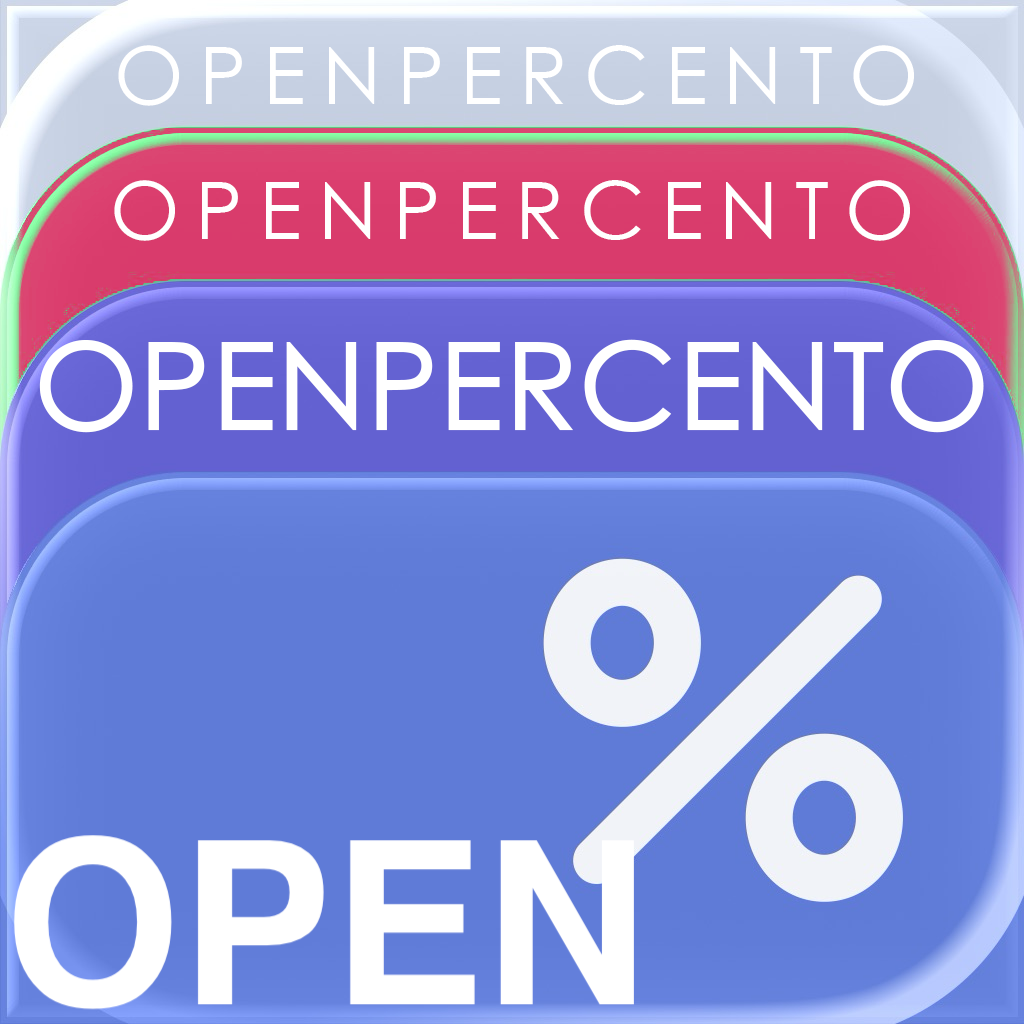
<style>
.page{position:relative;width:1024px;height:1024px}
.page>*{position:absolute;margin:0}
.t1{font:80px "STHeitiSC-Light";letter-spacing:0.2em;color:#ffffff;text-transform:uppercase}
.t2{font:120px "STHeitiSC-Medium";letter-spacing:0.01em;color:#ffffff;text-transform:uppercase}
</style>
<div class="page">
<p class="t1" style="left:118px;top:45px;width:796px;height:61px">OPENPercento</p>
<p class="t1" style="left:114px;top:180px;width:796px;height:61px">OPENPercento</p>
<p class="t2" style="left:39px;top:339px;width:945px;height:94px">OPENPercento</p>
</div>
